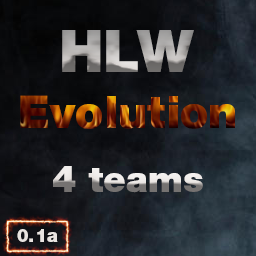
<style>
.page{position:relative;width:256px;height:256px}
.page>*{position:absolute;margin:0}
.t1{font:58.7px "HelveticaNeueLTPro-Blk"}
.t2{font:45.2px "HelveticaNeueLTPro-Blk"}
.t3{font:36.1px "HelveticaNeueLTPro-Blk"}
.t4{font:18.1px "HelveticaNeueLTPro-Blk";color:#e9e4e1}
</style>
<div class="page">
<p class="t1" style="left:62px;top:30px;width:132px;height:42px">HLW</p>
<p class="t2" style="left:20px;top:95px;width:215px;height:34px">Evolution</p>
<p class="t3" style="left:53px;top:166px;width:150px;height:27px">4 teams</p>
<p class="t4" style="left:17px;top:229px;width:41px;height:13px">0.1a</p>
</div>
